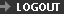
<style>
.page{position:relative;width:64px;height:14px;background:#333333}
.page>*{position:absolute;margin:0}
.t1{font:11px "Ebrima-Bold";color:#fcfbfb}
</style>
<div class="page">
<p class="t1" style="left:17px;top:3px;width:43px;height:8px">LOGOUT</p>
</div>
